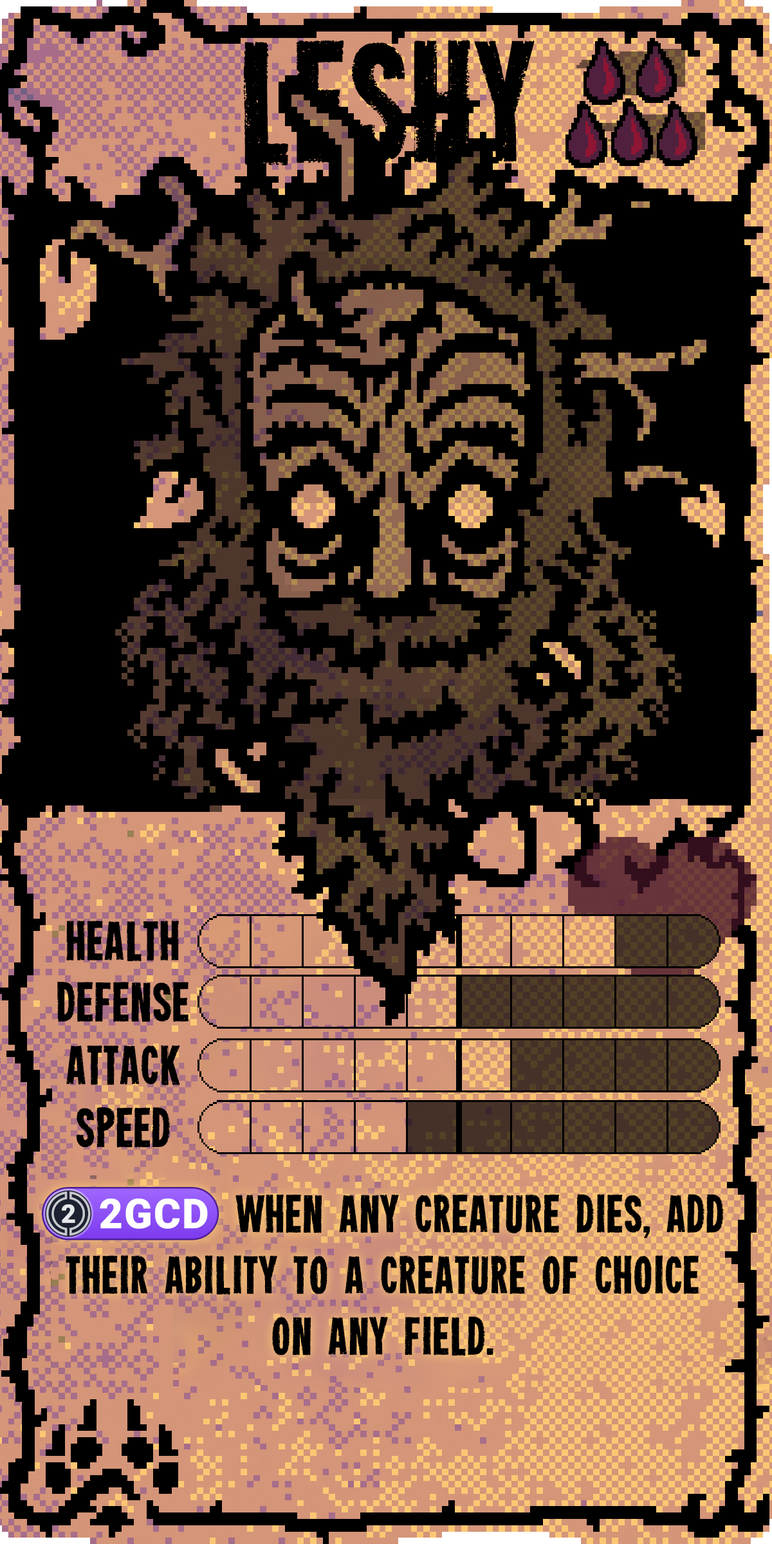
<style>
.page{position:relative;width:772px;height:1544px;background:#000000}
.page>*{position:absolute;margin:0}
.t1{font:258.7px "Heavyweight";color:#000000}
.t2{font:83.6px "Heavyweight";color:#000000}
.t3{font:80.4px/61.1px "Heavyweight";color:#000000}
.t4{font:93px/61.1px "stoogedings-Regular";color:#000000}
</style>
<div class="page">
<p class="t1" style="left:243px;top:40px;width:292px;height:126px">Leshy</p>
<p class="t2" style="left:66px;top:921px;width:113px;height:41px">Health</p>
<p class="t2" style="left:57px;top:982px;width:132px;height:40px">Defense</p>
<p class="t2" style="left:66px;top:1046px;width:114px;height:40px">Attack</p>
<p class="t2" style="left:76px;top:1107px;width:95px;height:41px">Speed</p>
<p class="t3" style="left:41px;top:1187px;width:683px;height:169px;text-align:center"><span class="t4">(2GCD)</span> when any creature dies, add their ability to a creature of choice on any field.</p>
</div>
